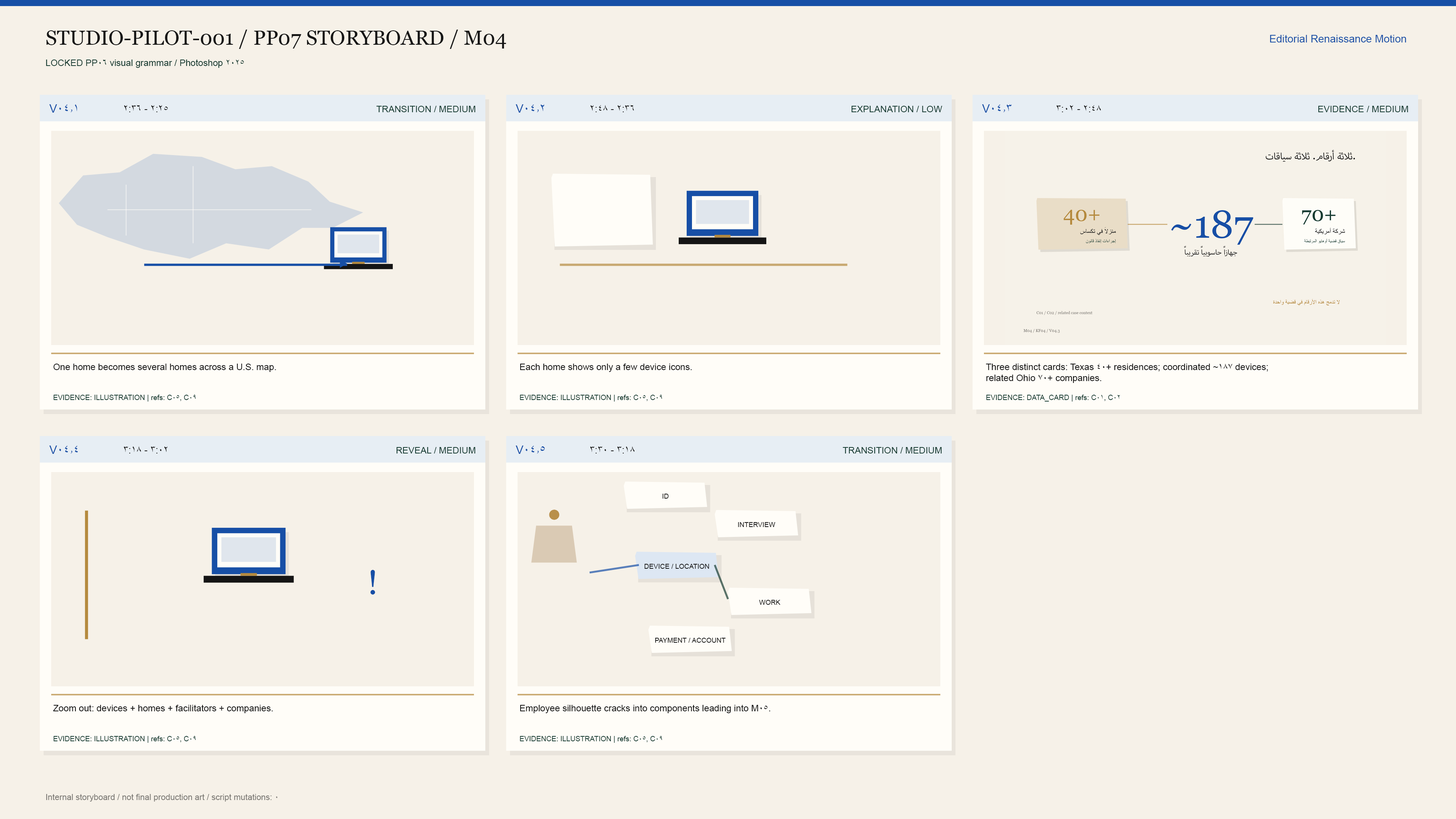
<style>
.page{position:relative;width:1456px;height:819px;background:#f6f1e8}
.page>*{position:absolute;margin:0}
.t1{font:20.5px "Georgia";color:#151515}
.t2{font:10.6px "ArialMT";color:#174fa6}
.t3{font:9.1px "ArialMT";color:#173c32}
.t4{font:11.8px "ArialMT";color:#174fa6}
.t5{font:9.9px "ArialMT";color:#151515}
.t6{font:9.1px "ArialMT";color:#151515}
.t7{font:7.2px "ArialMT";color:#173c32}
.t8{font:6.8px "ArialMT";color:#151515}
.t9{font:23.3px "ArialMT";color:#b58a3e}
.t10{font:34.1px "Georgia";color:#174fa6}
.t11{font:8.3px "ArialMT";color:#7b7974}
</style>
<div class="page">
<p class="t1" style="left:46px;top:30px;width:460px;height:19px">STUDIO-PILOT-001 / PP07 STORYBOARD / M04</p>
<p class="t2" style="left:1270px;top:35px;width:136px;height:7px">Editorial Renaissance Motion</p>
<p class="t3" style="left:46px;top:59px;width:198px;height:9px">LOCKED PP06 visual grammar / Photoshop 2025</p>
<p class="t4" style="left:49px;top:104px;width:28px;height:9px">V04.1</p>
<p class="t5" style="left:124px;top:105px;width:44px;height:7px">2:25 - 2:36</p>
<p class="t3" style="left:376px;top:106px;width:99px;height:6px">TRANSITION / MEDIUM</p>
<p class="t4" style="left:516px;top:104px;width:28px;height:9px">V04.2</p>
<p class="t5" style="left:590px;top:105px;width:44px;height:7px">2:36 - 2:48</p>
<p class="t3" style="left:851px;top:106px;width:91px;height:6px">EXPLANATION / LOW</p>
<p class="t4" style="left:982px;top:104px;width:30px;height:9px">V04.3</p>
<p class="t5" style="left:1056px;top:105px;width:45px;height:7px">2:48 - 3:02</p>
<p class="t3" style="left:1318px;top:106px;width:90px;height:6px">EVIDENCE / MEDIUM</p>
<p class="t6" style="left:53px;top:364px;width:223px;height:8px">One home becomes several homes across a U.S. map.</p>
<p class="t6" style="left:520px;top:364px;width:172px;height:8px">Each home shows only a few device icons.</p>
<p class="t6" style="left:986px;top:363px;width:282px;height:20px">Three distinct cards: Texas 40+ residences; coordinated ~187 devices;<br>related Ohio 70+ companies.</p>
<p class="t7" style="left:53px;top:395px;width:143px;height:7px">EVIDENCE: ILLUSTRATION | refs: C05, C09</p>
<p class="t7" style="left:520px;top:395px;width:142px;height:7px">EVIDENCE: ILLUSTRATION | refs: C05, C09</p>
<p class="t7" style="left:986px;top:395px;width:134px;height:7px">EVIDENCE: DATA_CARD | refs: C01, C02</p>
<p class="t4" style="left:49px;top:446px;width:29px;height:8px">V04.4</p>
<p class="t5" style="left:124px;top:446px;width:44px;height:7px">3:02 - 3:18</p>
<p class="t3" style="left:396px;top:447px;width:79px;height:6px">REVEAL / MEDIUM</p>
<p class="t4" style="left:516px;top:446px;width:29px;height:8px">V04.5</p>
<p class="t5" style="left:590px;top:446px;width:45px;height:7px">3:18 - 3:30</p>
<p class="t3" style="left:842px;top:447px;width:100px;height:6px">TRANSITION / MEDIUM</p>
<p class="t8" style="left:662px;top:494px;width:7px;height:5px">ID</p>
<p class="t9" style="left:549px;top:510px;width:10px;height:10px;opacity:0.95">●</p>
<p class="t8" style="left:738px;top:522px;width:37px;height:5px">INTERVIEW</p>
<p class="t10" style="left:370px;top:570px;width:5px;height:25px">!</p>
<p class="t8" style="left:645px;top:564px;width:64px;height:5px">DEVICE / LOCATION</p>
<p class="t8" style="left:759px;top:600px;width:21px;height:5px">WORK</p>
<p class="t8" style="left:655px;top:638px;width:71px;height:5px">PAYMENT / ACCOUNT</p>
<p class="t6" style="left:53px;top:704px;width:220px;height:9px">Zoom out: devices + homes + facilitators + companies.</p>
<p class="t6" style="left:520px;top:704px;width:250px;height:9px">Employee silhouette cracks into components leading into M05.</p>
<p class="t7" style="left:53px;top:736px;width:143px;height:7px">EVIDENCE: ILLUSTRATION | refs: C05, C09</p>
<p class="t7" style="left:520px;top:736px;width:142px;height:7px">EVIDENCE: ILLUSTRATION | refs: C05, C09</p>
<p class="t11" style="left:46px;top:794px;width:232px;height:8px">Internal storyboard / not final production art / script mutations: 0</p>
</div>
